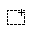
<style>
.page{position:relative;width:32px;height:32px;background:#ffffff}
.page>*{position:absolute;margin:0}
.t1{font:13.9px "ArialMT";letter-spacing:-0.05em;color:#000000}
</style>
<div class="page">
<p class="t1" style="left:18px;top:9px;width:7px;height:7px">+</p>
</div>
